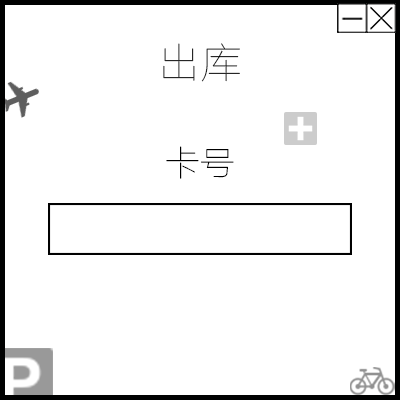
<style>
.page{position:relative;width:400px;height:400px;background:#ffffff}
.page>*{position:absolute;margin:0}
.t1{font:41.7px "FZLTCXHJW--GB1-0";color:#000000}
.t2{font:34.8px "FZLTCXHJW--GB1-0";color:#000000}
</style>
<div class="page">
<p class="t1" style="left:163px;top:43px;width:77px;height:39px">出库</p>
<p class="t2" style="left:166px;top:146px;width:68px;height:33px">卡号</p>
</div>
